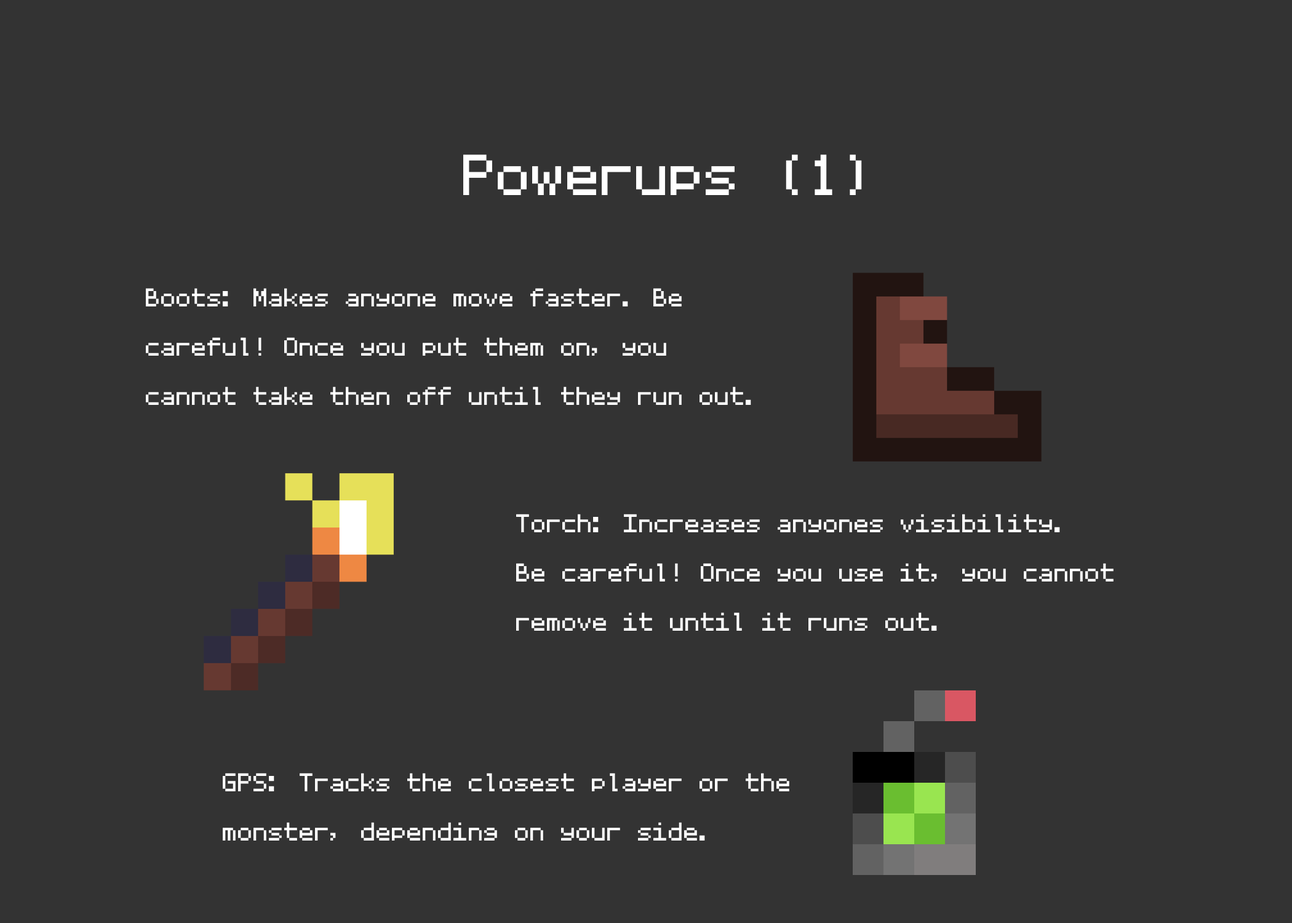
<style>
.page{position:relative;width:1292px;height:923px;background:#333333}
.page>*{position:absolute;margin:0}
.t1{font:92.3px "MozartNBP";color:#ffffff}
.t2{font:41px "MozartNBP";color:#ffffff}
</style>
<div class="page">
<p class="t1" style="left:463px;top:154px;width:399px;height:41px">Powerups (1)</p>
<p class="t2" style="left:146px;top:288px;width:605px;height:117px">Boots: Makes anyone move faster. Be<br>careful! Once you put them on, you<br>cannot take then off until they run out.</p>
<p class="t2" style="left:516px;top:514px;width:598px;height:117px">Torch: Increases anyones visibility. <br>Be careful! Once you use it, you cannot <br>remove it until it runs out.</p>
<p class="t2" style="left:223px;top:773px;width:566px;height:67px">GPS: Tracks the closest player or the <br>monster, depending on your side.</p>
</div>
